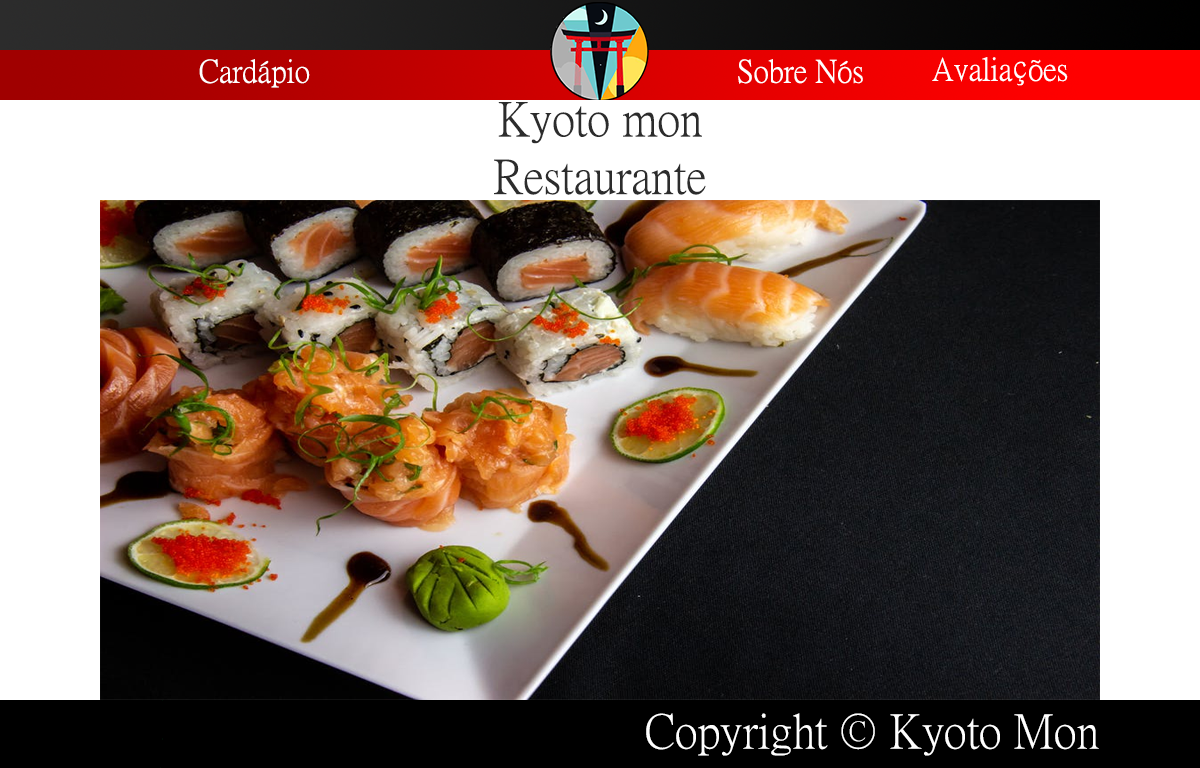
<style>
.page{position:relative;width:1200px;height:768px;background:#ffffff}
.page>*{position:absolute;margin:0}
.t1{font:32px "PMingLiU-ExtB";color:#ffffff}
.t2{font:48px "PMingLiU-ExtB";color:#2c2c2c}
.t3{font:48px "PMingLiU-ExtB";color:#ffffff}
</style>
<div class="page">
<p class="t1" style="left:199px;top:59px;width:111px;height:29px">Cardápio</p>
<p class="t1" style="left:738px;top:59px;width:125px;height:25px">Sobre Nós</p>
<p class="t1" style="left:932px;top:57px;width:136px;height:29px">Avaliações</p>
<p class="t2" style="left:494px;top:102px;width:212px;height:93px;text-align:center">Kyoto mon<br>Restaurante</p>
<p class="t3" style="left:646px;top:713px;width:453px;height:43px">Copyright © Kyoto Mon</p>
</div>
